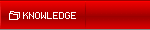
<style>
.page{position:relative;width:150px;height:30px}
.page>*{position:absolute;margin:0}
.t1{font:10px "IconBitOne";color:#ffffff}
.t2{font:10px "PEPgenius10";color:#ffffff}
</style>
<div class="page">
<p class="t1" style="left:9px;top:11px;width:11px;height:9px">Z</p>
<p class="t2" style="left:23px;top:12px;width:53px;height:7px">knowledge</p>
</div>
